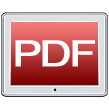
<style>
.page{position:relative;width:109px;height:109px;background:#ffffff}
.page>*{position:absolute;margin:0}
.t1{font:36px "ArialMT";letter-spacing:-0.075em;color:#ffffff;font-weight:bold;scale:1.22 1}
</style>
<div class="page">
<p class="t1" style="left:15px;top:40px;width:80px;height:27px">PDF</p>
</div>
